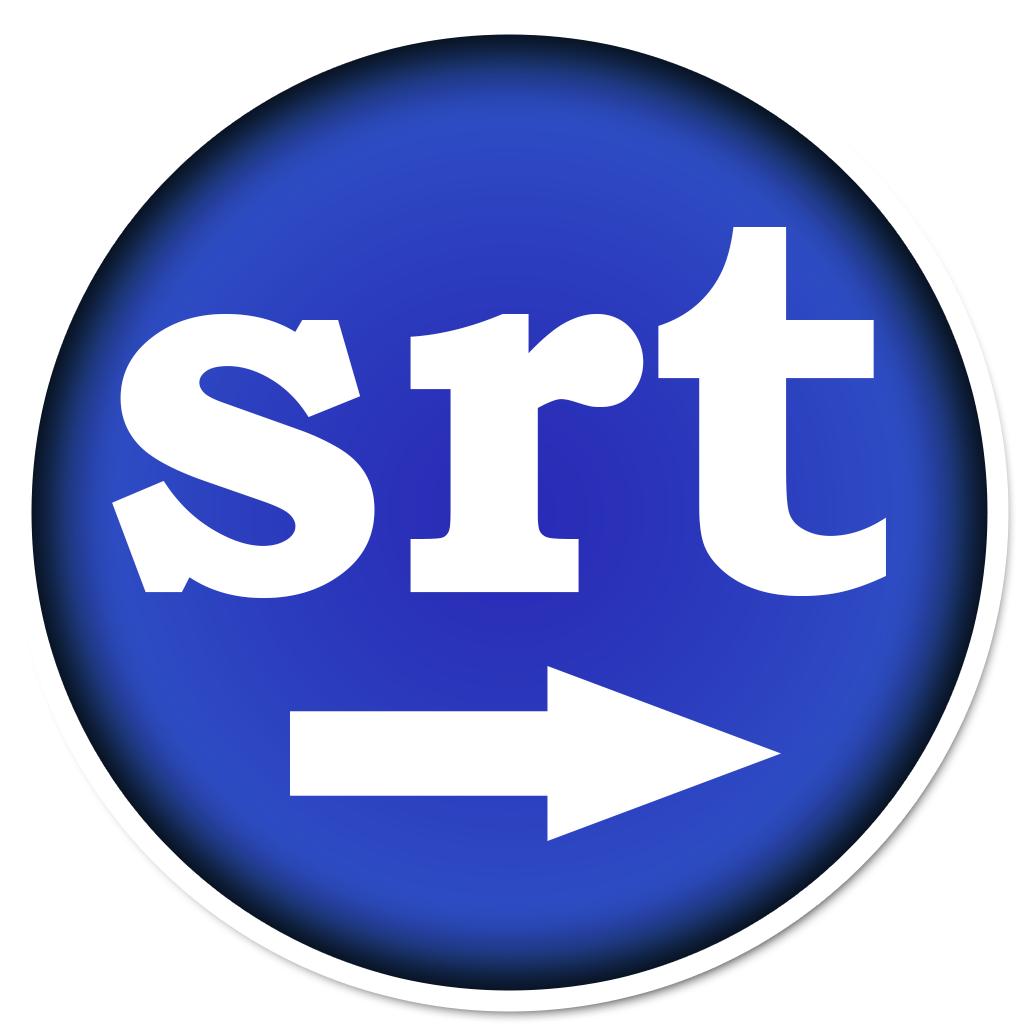
<style>
.page{position:relative;width:1024px;height:1024px;background:#ffffff}
.page>*{position:absolute;margin:0}
.t1{font:558.1px "BookmanOldStyle-Bold";color:#ffffff}
</style>
<div class="page">
<p class="t1" style="left:112px;top:227px;width:774px;height:371px">srt</p>
</div>
